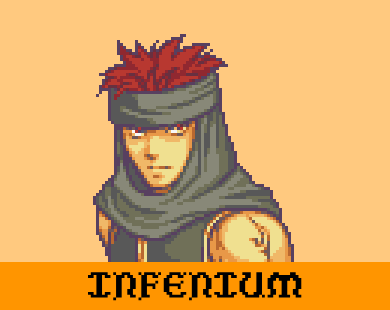
<style>
.page{position:relative;width:390px;height:310px;background:#ffc97f}
.page>*{position:absolute;margin:0}
.t1{font:44.9px "MedievalPixel";color:#000000}
</style>
<div class="page">
<p class="t1" style="left:88px;top:272px;width:214px;height:29px">INFENIUM</p>
</div>
